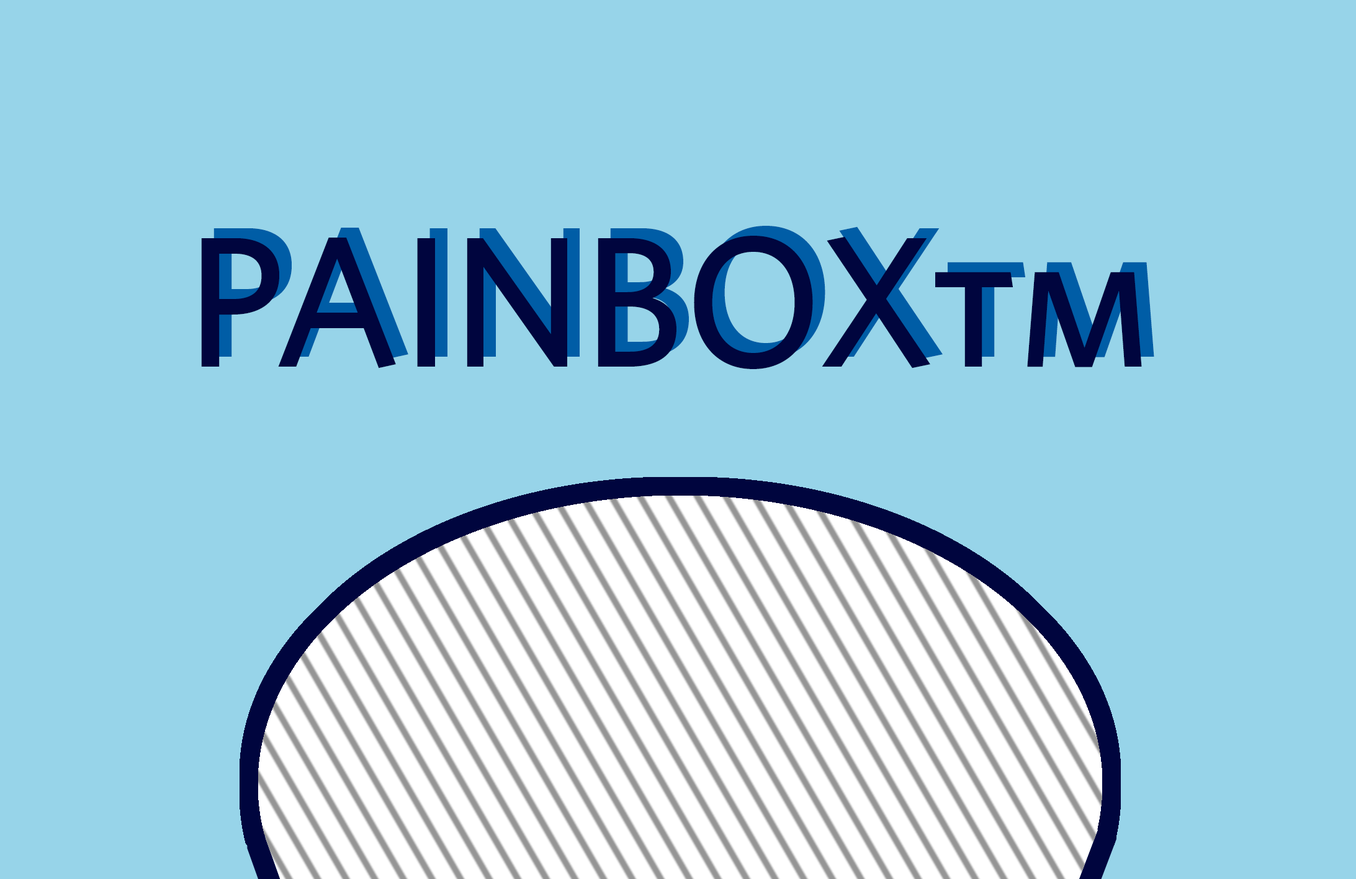
<style>
.page{position:relative;width:1356px;height:879px;background:#97d4e9}
.page>*{position:absolute;margin:0}
.t1{font:186.2px "Whitney-MediumSC";color:#005da6}
.t2{font:186.2px "Whitney-MediumSC";color:#00053e}
</style>
<div class="page">
<p class="t1" style="left:213px;top:226px;width:941px;height:133px">PAINBOXtm</p>
<p class="t2" style="left:201px;top:236px;width:941px;height:133px">PAINBOXtm</p>
</div>
